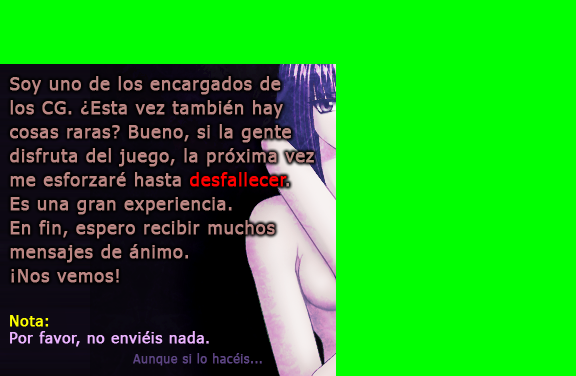
<style>
.page{position:relative;width:576px;height:376px;background:#00ff00}
.page>*{position:absolute;margin:0}
.t1{font:18px/24px "Tahoma";letter-spacing:0.04em;color:#bb8683;font-weight:bold}
.t2{font:18px/24px "Tahoma";letter-spacing:0.04em;color:#ff0000;font-weight:bold}
.t3{font:15px "Tahoma";letter-spacing:0.04em;color:#fcff00;font-weight:bold}
.t4{font:15px "Tahoma";letter-spacing:0.04em;color:#ebb3ff;font-weight:bold}
.t5{font:12px "Tahoma";letter-spacing:0.04em;color:#5d4584;font-weight:bold}
</style>
<div class="page">
<p class="t1" style="left:10px;top:76px;width:304px;height:207px">Soy uno de los encargados de <br>los CG. ¿Esta vez también hay<br>cosas raras? Bueno, si la gente<br>disfruta del juego, la próxima vez<br>me esforzaré hasta <span class="t2">desfallecer</span>.<br>Es una gran experiencia.<br>En fin, espero recibir muchos<br>mensajes de ánimo.<br>¡Nos vemos!</p>
<p class="t3" style="left:10px;top:315px;width:39px;height:12px">Nota:</p>
<p class="t4" style="left:10px;top:331px;width:199px;height:16px">Por favor, no enviéis nada.</p>
<p class="t5" style="left:133px;top:353px;width:129px;height:13px">Aunque si lo hacéis...</p>
</div>
